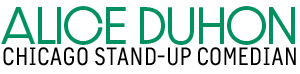
<style>
.page{position:relative;width:300px;height:74px;background:#ffffff}
.page>*{position:absolute;margin:0}
.t1{font:25px/21px "Nure-CondensedLight";letter-spacing:0.005em;color:#000000;text-transform:uppercase}
.t2{font:44.5px/12px "DazzleUnicase-Light";letter-spacing:-0.01em;color:#009161;text-transform:uppercase}
</style>
<div class="page">
<p class="t1" style="left:1px;top:6px;width:295px;height:60px;text-align:center"><span class="t2">ALICE DUHON<br></span>CHICAGO STAND-UP COMEDIAN</p>
</div>
